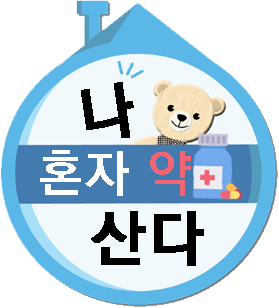
<style>
.page{position:relative;width:279px;height:308px;background:#ffffff}
.page>*{position:absolute;margin:0}
.t1{font:62px "KoPubDotumBold";letter-spacing:0.05em;color:#000000;font-weight:bold}
.t2{font:50px "KoPubDotumBold";letter-spacing:0.05em;color:#ffffff}
.t3{font:50px "KoPubDotumBold";letter-spacing:0.05em;color:#f26674}
.t4{font:61.3px "KoPubDotumBold";letter-spacing:0.05em;color:#000000;font-weight:bold}
</style>
<div class="page">
<p class="t1" style="left:81px;top:82px;width:53px;height:56px;rotate:-8deg">나</p>
<p class="t2" style="left:40px;top:150px;width:151px;height:46px">혼자 <span class="t3">약</span></p>
<p class="t4" style="left:91px;top:211px;width:113px;height:55px">산다</p>
</div>
